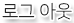
<style>
.page{position:relative;width:74px;height:23px;background:#ffffff}
.page>*{position:absolute;margin:0}
.t1{font:18px "NanumSquareL"}
</style>
<div class="page">
<p class="t1" style="left:2px;top:2px;width:70px;height:18px">로그 아웃</p>
</div>
